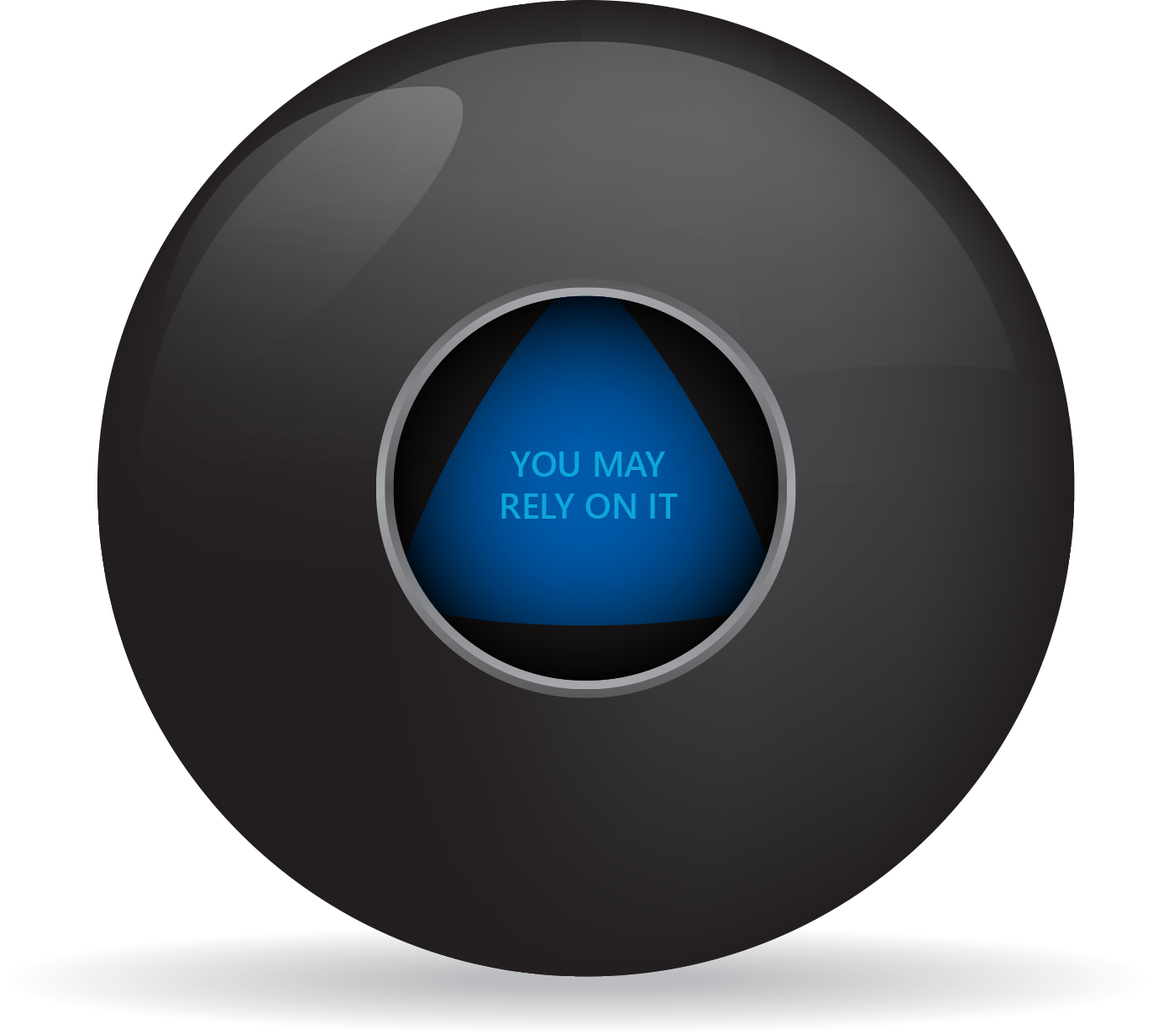
<style>
.page{position:relative;width:1153px;height:1034px;background:#ffffff}
.page>*{position:absolute;margin:0}
.t1{font:35.3px "SegoeUI-Semibold";color:#0da5d8;text-transform:uppercase}
</style>
<div class="page">
<p class="t1" style="left:501px;top:452px;width:177px;height:67px;text-align:center">YOU MAY<br>RELY ON IT</p>
</div>
